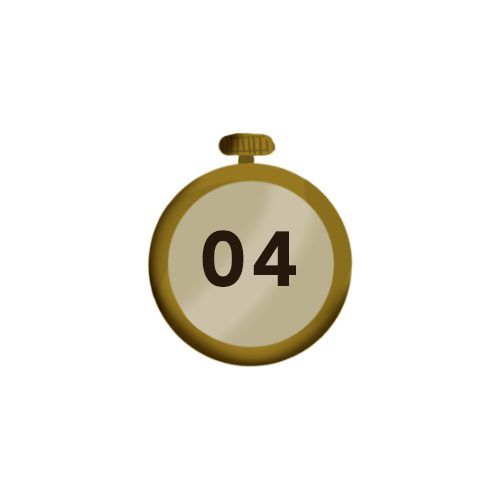
<style>
.page{position:relative;width:500px;height:500px;background:#ffffff}
.page>*{position:absolute;margin:0}
.t1{font:77.4px "Avenir-Black";letter-spacing:0.075em;color:#25190e}
</style>
<div class="page">
<p class="t1" style="left:202px;top:230px;width:94px;height:57px">04</p>
</div>
